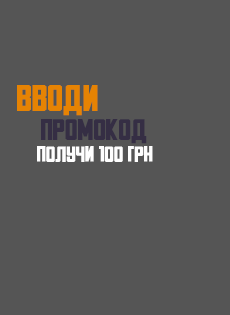
<style>
.page{position:relative;width:230px;height:315px;background:#555555}
.page>*{position:absolute;margin:0}
.t1{font:24px "PonterX";color:#352e44}
.t2{font:30px "PonterX";color:#e68303}
.t3{font:18px "PonterX";color:#fefefe}
</style>
<div class="page">
<p class="t1" style="left:17px;top:85px;width:130px;height:59px;text-align:right"><span class="t2">ВВОДИ <br></span>    промокод</p>
<p class="t3" style="left:37px;top:146px;width:116px;height:16px">ПОЛУЧИ 100 грн</p>
</div>
